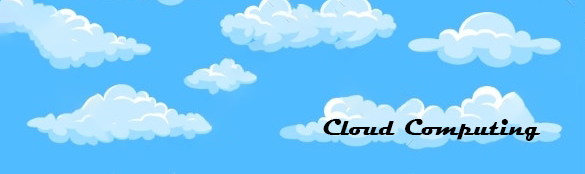
<style>
.page{position:relative;width:585px;height:174px;background:#50bbff}
.page>*{position:absolute;margin:0}
.t1{font:24px "Magneto-Bold";color:#000000}
</style>
<div class="page">
<p class="t1" style="left:323px;top:119px;width:218px;height:22px">Cloud Computing</p>
</div>
